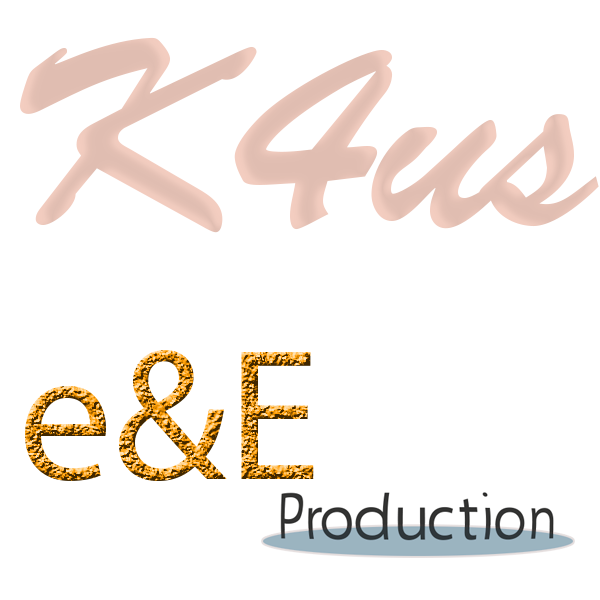
<style>
.page{position:relative;width:600px;height:600px;background:#ffffff}
.page>*{position:absolute;margin:0}
.t1{font:267px "BrushScriptStd";color:#f3cdc0}
.t2{font:189px "MyriadPro-Regular"}
</style>
<div class="page">
<p class="t1" style="left:20px;top:37px;width:579px;height:196px">K4us</p>
<p class="t2" style="left:25px;top:350px;width:289px;height:131px">e&amp;E</p>
</div>
